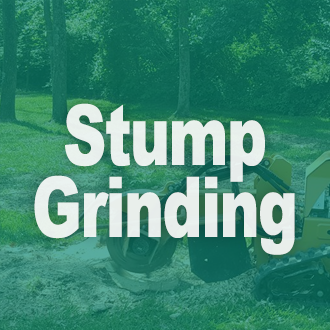
<style>
.page{position:relative;width:330px;height:330px}
.page>*{position:absolute;margin:0}
.t1{font:84px/72px "Arial-Black";letter-spacing:-0.025em;color:#ffffff;scale:0.71 1}
</style>
<div class="page">
<p class="t1" style="left:34px;top:103px;width:261px;height:152px;text-align:center;opacity:0.85">Stump<br>Grinding</p>
</div>
